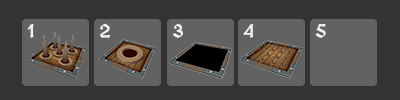
<style>
.page{position:relative;width:400px;height:100px;background:#333333}
.page>*{position:absolute;margin:0}
.t1{font:18px "MedievalSharp";letter-spacing:0.06em;color:#ffffff;text-transform:uppercase;font-weight:bold}
</style>
<div class="page">
<p class="t1" style="left:27px;top:23px;width:7px;height:15px;opacity:0.9">1</p>
<p class="t1" style="left:100px;top:23px;width:10px;height:15px;opacity:0.9">2</p>
<p class="t1" style="left:173px;top:23px;width:10px;height:15px;opacity:0.9">3</p>
<p class="t1" style="left:243px;top:23px;width:10px;height:15px;opacity:0.9">4</p>
<p class="t1" style="left:315px;top:23px;width:11px;height:15px;opacity:0.9">5</p>
</div>
